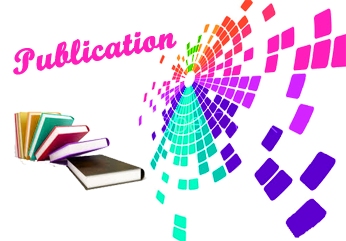
<style>
.page{position:relative;width:346px;height:241px;background:#ffffff}
.page>*{position:absolute;margin:0}
.t1{font:33.6px "ScriptMTBold";color:#ff1eba;font-weight:bold}
</style>
<div class="page">
<p class="t1" style="left:13px;top:31px;width:164px;height:44px;rotate:-10deg">Publication</p>
</div>
